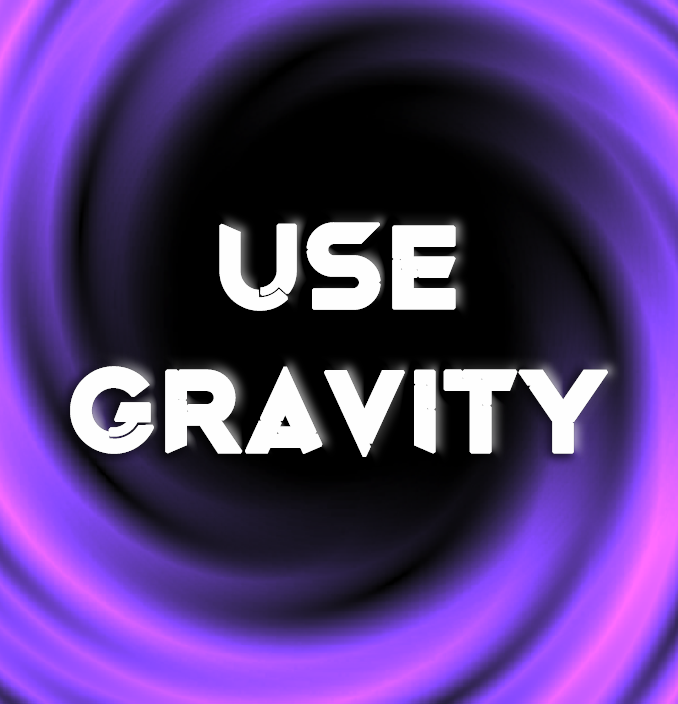
<style>
.page{position:relative;width:678px;height:704px}
.page>*{position:absolute;margin:0}
.t1{font:120px "OriginTechDemoRegular";color:#fefefe;font-weight:bold}
</style>
<div class="page">
<p class="t1" style="left:70px;top:222px;width:538px;height:235px;text-align:center">Use<br>Gravity</p>
</div>
